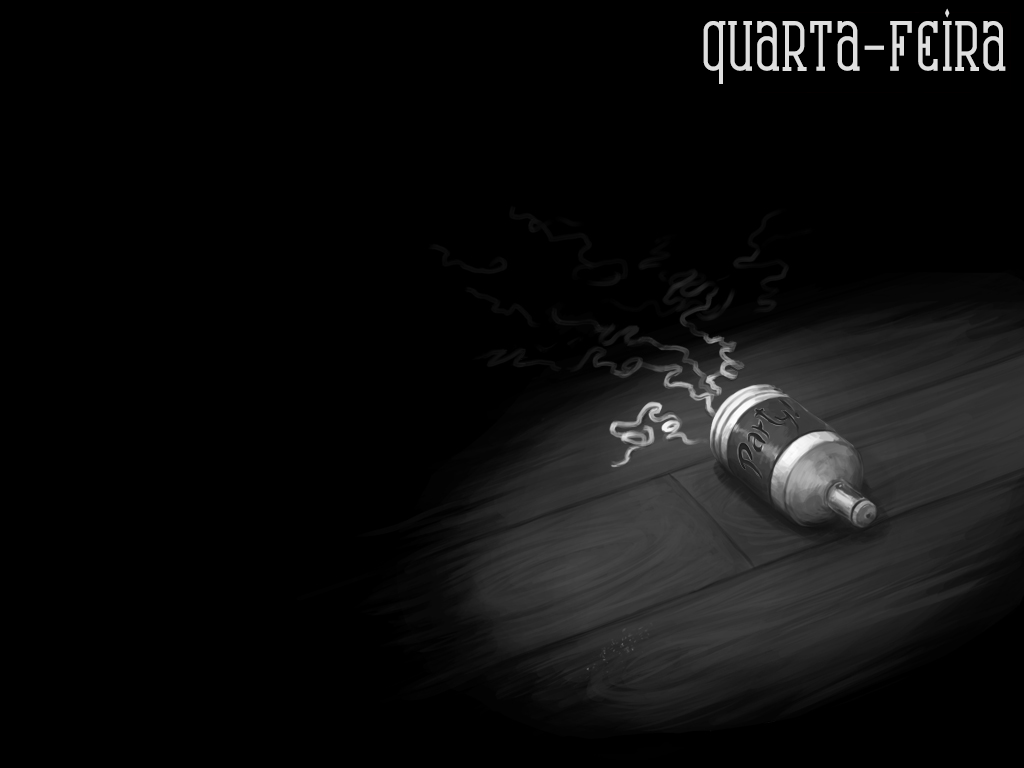
<style>
.page{position:relative;width:1024px;height:768px;background:#000000}
.page>*{position:absolute;margin:0}
.t1{font:76px "CatharsisRequiemBold";letter-spacing:0.003em;color:#dfdfdf}
</style>
<div class="page">
<p class="t1" style="left:703px;top:8px;width:303px;height:76px">quarta-feira</p>
</div>
